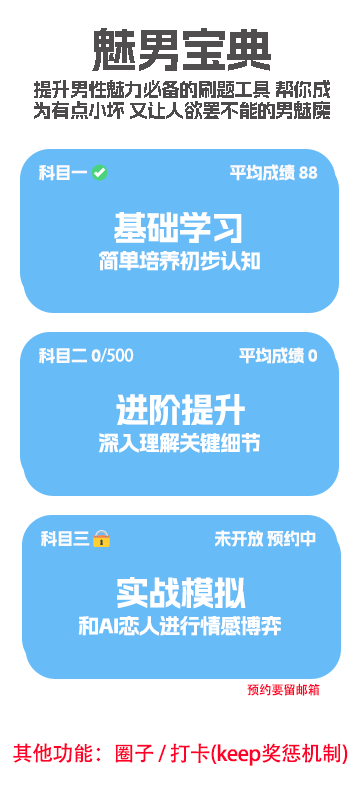
<style>
.page{position:relative;width:360px;height:800px;background:#67bcf8}
.page>*{position:absolute;margin:0}
.t1{font:45.8px "AlimamaShuHeiTi";letter-spacing:-0.025em;color:#504e4e}
.t2{font:18.8px/20.8px "AlimamaShuHeiTi";letter-spacing:-0.025em;color:#4c4a4a}
.t3{font:16.7px "AlimamaShuHeiTi";letter-spacing:-0.025em;color:#fbfbfb}
.t4{font:16.7px "EmojiOneColor";letter-spacing:-0.025em;color:#fbfbfb}
.t5{font:33.3px "AlimamaShuHeiTi";letter-spacing:-0.025em;color:#ffffff}
.t6{font:20.8px "AlimamaShuHeiTi";letter-spacing:-0.025em;color:#ffffff}
.t7{font:16.7px "AdobeHeitiStd-Regular";letter-spacing:-0.025em;color:#fbfbfb}
.t8{font:12.5px "AdobeHeitiStd-Regular";letter-spacing:-0.025em;color:#ff002a}
.t9{font:20.8px "AdobeHeitiStd-Regular";letter-spacing:-0.025em;color:#ff002a}
</style>
<div class="page">
<p class="t1" style="left:92px;top:28px;width:179px;height:43px">魅男宝典</p>
<p class="t2" style="left:34px;top:80px;width:296px;height:39px">提升男性魅力必备的刷题工具 帮你成<br>为有点小坏 又让人欲罢不能的男魅魔</p>
<p class="t3" style="left:39px;top:164px;width:279px;height:17px">科目一 <span class="t4">✅                                        </span>平均成绩 88</p>
<p class="t5" style="left:114px;top:212px;width:128px;height:31px">基础学习</p>
<p class="t6" style="left:99px;top:251px;width:161px;height:20px">简单培养初步认知</p>
<p class="t3" style="left:39px;top:347px;width:278px;height:17px">科目二 0<span class="t7">/500                                </span>平均成绩 0</p>
<p class="t5" style="left:116px;top:394px;width:129px;height:31px">进阶提升</p>
<p class="t6" style="left:99px;top:433px;width:161px;height:20px">深入理解关键细节</p>
<p class="t3" style="left:41px;top:530px;width:275px;height:17px">科目三 <span class="t4">🔒                                    </span>未开放 预约中</p>
<p class="t5" style="left:117px;top:577px;width:129px;height:32px">实战模拟</p>
<p class="t6" style="left:78px;top:616px;width:203px;height:20px">和AI恋人进行情感博弈</p>
<p class="t8" style="left:247px;top:683px;width:73px;height:13px">预约要留邮箱</p>
<p class="t9" style="left:13px;top:743px;width:335px;height:23px">其他功能：圈子 / 打卡(keep奖惩机制)</p>
</div>
